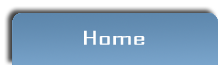
<style>
.page{position:relative;width:218px;height:65px}
.page>*{position:absolute;margin:0}
.t1{font:18px "AgencyFB-Reg";color:#ffffff;scale:2 1}
</style>
<div class="page">
<p class="t1" style="left:84px;top:30px;width:61px;height:15px">Home</p>
</div>
